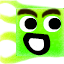
<style>
.page{position:relative;width:64px;height:64px;background:#ffffff}
.page>*{position:absolute;margin:0}
.t1{font:60px "TimesNewRomanPSMT";font-weight:bold;scale:1.06 1}
.t2{font:44.4px "TimesNewRomanPSMT";letter-spacing:0.15em;color:#000000;font-weight:bold;scale:1.04 1}
.t3{font:30px "KomikaAxis";letter-spacing:0.06em;color:#000000;font-weight:bold}
.t4{font:16.8px "KomikaAxis";letter-spacing:0.06em;color:#ffffff;font-weight:bold}
</style>
<div class="page">
<p class="t1" style="left:19px;top:16px;width:42px;height:16px">••</p>
<p class="t2" style="left:24px;top:18px;width:37px;height:12px">••</p>
<p class="t3" style="left:23px;top:32px;width:28px;height:24px;rotate:90deg">D</p>
<p class="t4" style="left:28px;top:38px;width:16px;height:13px;rotate:90deg">D</p>
</div>
